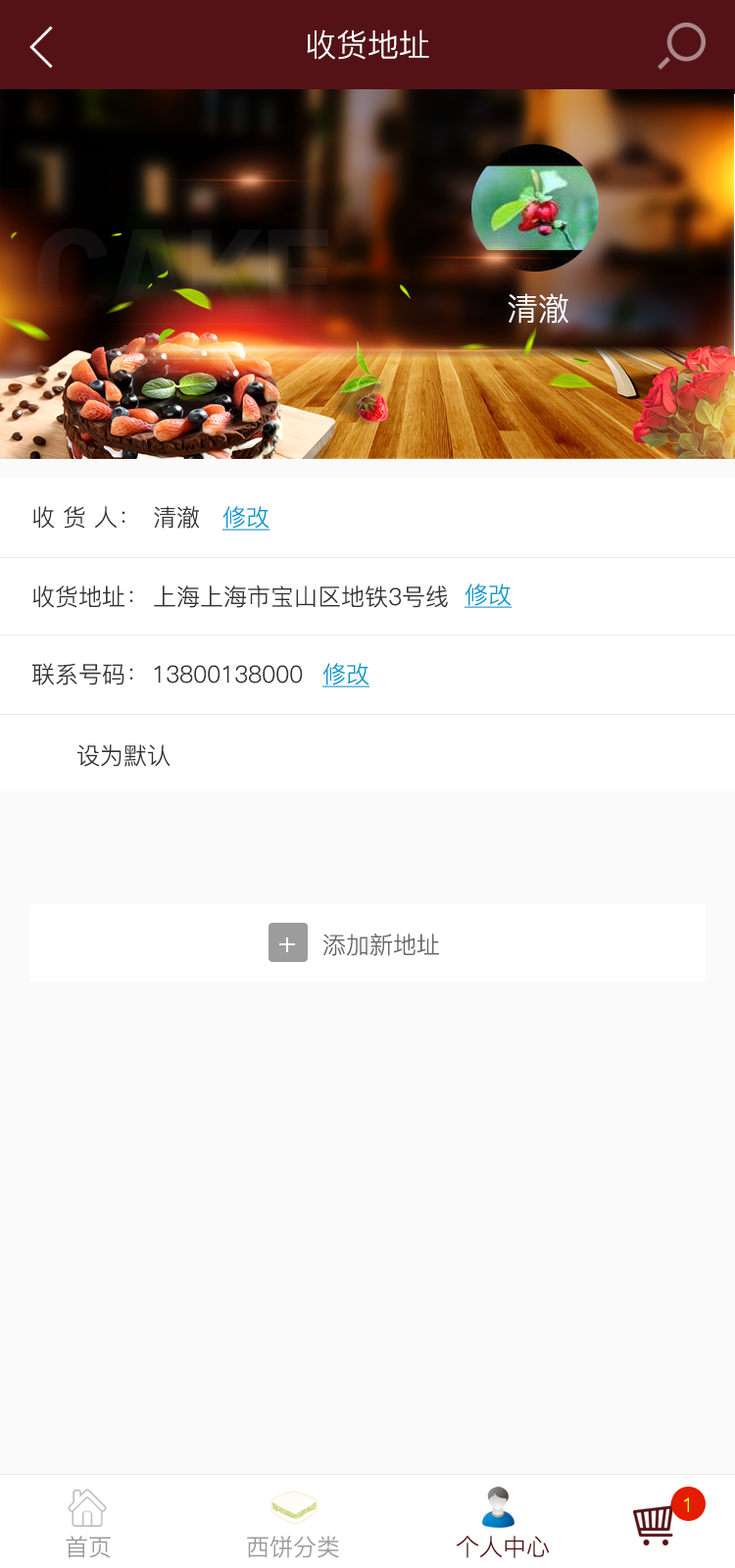
<style>
.page{position:relative;width:735px;height:1568px;background:#fafafa}
.page>*{position:absolute;margin:0}
.t1{font:31.4px "PingFang-SC-Regular";color:#ffffff}
.t2{font:23.5px "PingFang-SC-Regular";color:#333333}
.t3{font:23.5px "PingFang-SC-Regular";color:#0099cc;text-decoration:underline}
.t4{font:29.4px "PingFang-SC-Regular";color:#ffffff}
.t5{font:23.5px "PingFang-SC-Regular";color:#666666}
.t6{font:19.6px "PingFang-SC-Regular";color:#ffff00}
.t7{font:23.5px "PingFang-SC-Regular";color:#999999}
.t8{font:23.5px "PingFang-SC-Regular";color:#541217}
</style>
<div class="page">
<p class="t1" style="left:307px;top:29px;width:123px;height:31px">收货地址</p>
<p class="t1" style="left:508px;top:293px;width:61px;height:31px">清澈</p>
<p class="t2" style="left:33px;top:506px;width:93px;height:23px">收 货 人：</p>
<p class="t2" style="left:154px;top:506px;width:46px;height:23px">清澈</p>
<p class="t3" style="left:223px;top:506px;width:48px;height:25px">修改</p>
<p class="t2" style="left:33px;top:585px;width:100px;height:23px">收货地址：</p>
<p class="t2" style="left:154px;top:585px;width:294px;height:23px">上海上海市宝山区地铁3号线</p>
<p class="t3" style="left:465px;top:583px;width:48px;height:25px">修改</p>
<p class="t2" style="left:32px;top:663px;width:101px;height:22px">联系号码：</p>
<p class="t2" style="left:154px;top:665px;width:149px;height:18px">13800138000</p>
<p class="t3" style="left:323px;top:663px;width:48px;height:24px">修改</p>
<p class="t2" style="left:77px;top:744px;width:94px;height:23px">设为默认</p>
<p class="t4" style="left:279px;top:937px;width:16px;height:15px">+</p>
<p class="t5" style="left:324px;top:934px;width:115px;height:22px">添加新地址</p>
<p class="t6" style="left:684px;top:1497px;width:5px;height:15px">1</p>
<p class="t7" style="left:66px;top:1536px;width:45px;height:22px">首页</p>
<p class="t7" style="left:247px;top:1536px;width:92px;height:22px">西饼分类</p>
<p class="t8" style="left:456px;top:1536px;width:94px;height:22px">个人中心</p>
</div>
